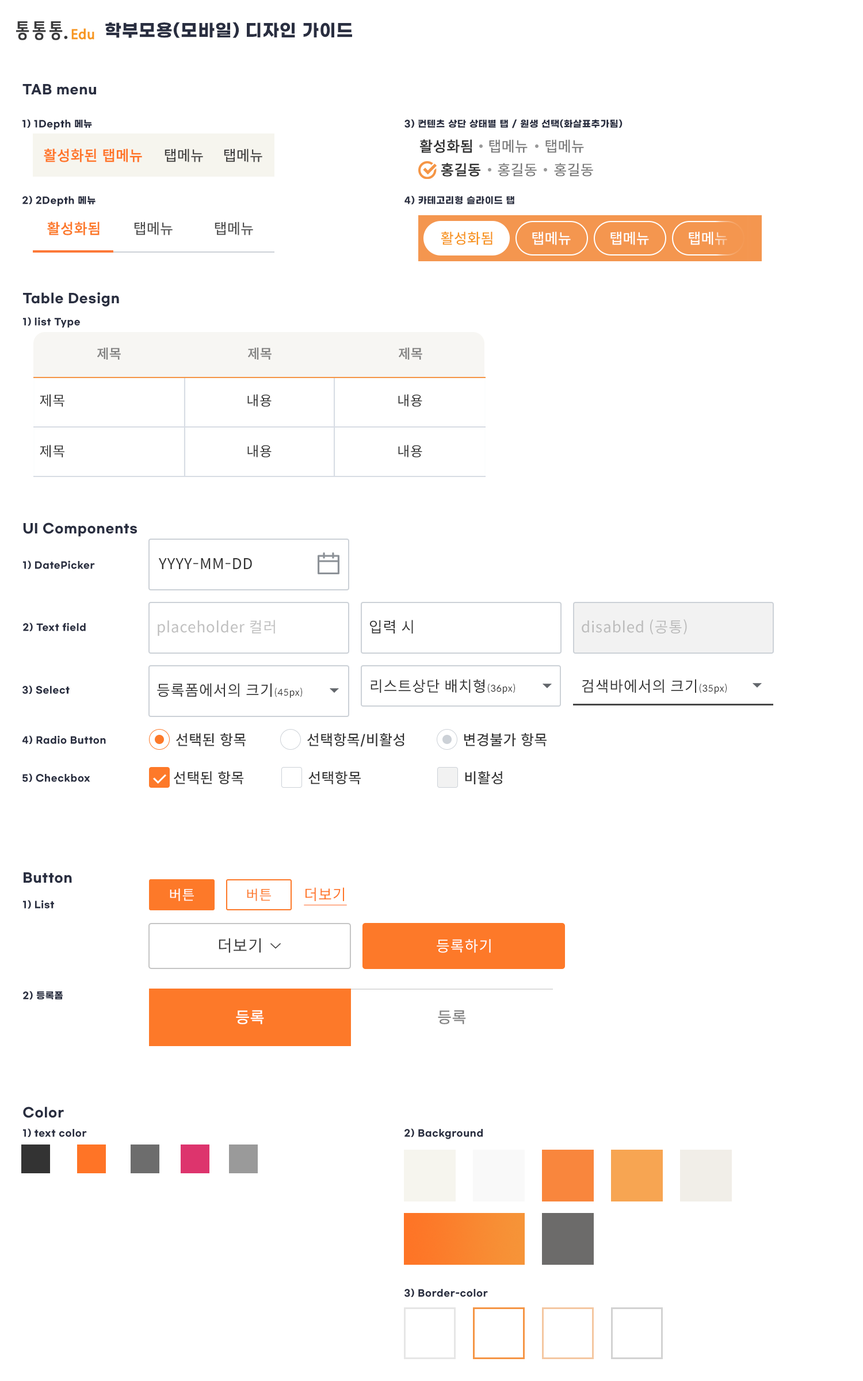
<style>
.page{position:relative;width:863px;height:1381px;background:#ffffff}
.page>*{position:absolute;margin:0}
.t1{font:17.3px "GmarketSansTTFBold";letter-spacing:0.04em;color:#292e40}
.t2{font:12.7px "GmarketSansTTFBold";letter-spacing:0.04em;color:#292e40}
.t3{font:9.2px "GmarketSansTTFBold";letter-spacing:0.04em;color:#292e40}
.t4{font:15px "Pretendard-Medium";letter-spacing:0.04em;color:#ff7426;font-weight:bold}
.t5{font:15px "Pretendard-Medium";letter-spacing:0.04em;color:#333333}
.t6{font:15px "Pretendard-Medium";letter-spacing:0.04em;color:#333333;font-weight:bold}
.t7{font:15px "Pretendard-Medium";letter-spacing:0.04em;color:#7a7a7a}
.t8{font:15px "Pretendard-Medium";letter-spacing:0.04em;color:#fc7828;font-weight:bold}
.t9{font:15px "Pretendard-Medium";letter-spacing:0.04em;color:#535353}
.t10{font:15px "Pretendard-Medium";letter-spacing:0.04em;color:#f79520}
.t11{font:15px "Pretendard-Medium";letter-spacing:0.04em;color:#ffffff}
.t12{font:13.8px "Pretendard-SemiBold";letter-spacing:0.04em;color:#838383}
.t13{font:13.8px "SpoqaHanSans-Regular";letter-spacing:0.04em;color:#333333}
.t14{font:15px "SpoqaHanSans-Regular";letter-spacing:0.04em;color:#333333}
.t15{font:15px "SpoqaHanSans-Regular";letter-spacing:0.04em;color:#c0c0c0}
.t16{font:15px "SpoqaHanSans-Regular";letter-spacing:0.04em;color:#bcbcbc}
.t17{font:9.2px "SpoqaHanSans-Regular";letter-spacing:0.04em;color:#333333}
.t18{font:14.8px "Pretendard-Medium";letter-spacing:0.04em;color:#333333}
.t19{font:13.8px "SpoqaHanSans-Regular";letter-spacing:0.04em;color:#ffffff}
.t20{font:13.8px "SpoqaHanSans-Regular";letter-spacing:0.04em;color:#fd7929}
.t21{font:15px "SpoqaHanSans-Regular";letter-spacing:0.04em;color:#ff7426;text-decoration:underline}
.t22{font:16.1px "SpoqaHanSans-Regular";letter-spacing:0.04em;color:#3c3c3c}
.t23{font:15px "SpoqaHanSans-Regular";letter-spacing:0.04em;color:#ffffff}
.t24{font:16.1px "Pretendard-Regular";letter-spacing:0.04em;color:#ffffff;font-weight:bold}
.t25{font:16.1px "Pretendard-Regular";letter-spacing:0.04em;color:#848484;font-weight:bold}
</style>
<div class="page">
<p class="t1" style="left:105px;top:22px;width:247px;height:16px">학부모용(모바일) 디자인 가이드</p>
<p class="t2" style="left:22px;top:84px;width:74px;height:11px">TAB menu</p>
<p class="t3" style="left:22px;top:119px;width:70px;height:11px">1) 1Depth 메뉴</p>
<p class="t3" style="left:405px;top:119px;width:218px;height:9px">3) 컨텐츠 상단 상태별 탭 / 원생 선택(화살표추가됨)</p>
<p class="t4" style="left:44px;top:148px;width:98px;height:14px">활성화된 탭메뉴</p>
<p class="t5" style="left:165px;top:148px;width:38px;height:14px;opacity:0.95">탭메뉴</p>
<p class="t5" style="left:224px;top:148px;width:38px;height:14px;opacity:0.95">탭메뉴</p>
<p class="t6" style="left:420px;top:139px;width:52px;height:14px">활성화됨</p>
<p class="t7" style="left:489px;top:139px;width:39px;height:14px">탭메뉴</p>
<p class="t7" style="left:546px;top:139px;width:38px;height:14px">탭메뉴</p>
<p class="t6" style="left:441px;top:163px;width:40px;height:14px">홍길동</p>
<p class="t7" style="left:498px;top:163px;width:39px;height:14px">홍길동</p>
<p class="t7" style="left:554px;top:163px;width:39px;height:14px">홍길동</p>
<p class="t3" style="left:22px;top:196px;width:74px;height:11px">2) 2Depth 메뉴</p>
<p class="t3" style="left:405px;top:196px;width:110px;height:8px">4) 카테고리형 슬라이드 탭</p>
<p class="t8" style="left:47px;top:222px;width:53px;height:13px">활성화됨</p>
<p class="t9" style="left:134px;top:222px;width:39px;height:13px">탭메뉴</p>
<p class="t9" style="left:215px;top:222px;width:38px;height:13px">탭메뉴</p>
<p class="t10" style="left:441px;top:231px;width:52px;height:14px">활성화됨</p>
<p class="t11" style="left:532px;top:231px;width:39px;height:14px">탭메뉴</p>
<p class="t11" style="left:611px;top:231px;width:38px;height:14px">탭메뉴</p>
<p class="t11" style="left:689px;top:231px;width:38px;height:14px">탭메뉴</p>
<p class="t2" style="left:23px;top:292px;width:96px;height:15px">Table Design</p>
<p class="t3" style="left:23px;top:317px;width:57px;height:11px">1) list Type</p>
<p class="t12" style="left:97px;top:348px;width:24px;height:12px">제목</p>
<p class="t12" style="left:247px;top:348px;width:25px;height:12px">제목</p>
<p class="t12" style="left:398px;top:348px;width:24px;height:12px">제목</p>
<p class="t13" style="left:40px;top:394px;width:24px;height:13px">제목</p>
<p class="t13" style="left:247px;top:394px;width:25px;height:13px">내용</p>
<p class="t13" style="left:398px;top:394px;width:24px;height:13px">내용</p>
<p class="t13" style="left:40px;top:445px;width:24px;height:13px">제목</p>
<p class="t13" style="left:247px;top:445px;width:25px;height:13px">내용</p>
<p class="t13" style="left:398px;top:445px;width:24px;height:13px">내용</p>
<p class="t2" style="left:23px;top:523px;width:114px;height:14px">UI Components</p>
<p class="t3" style="left:23px;top:561px;width:72px;height:8px">1) DatePicker</p>
<p class="t14" style="left:158px;top:558px;width:94px;height:11px">YYYY-MM-DD</p>
<p class="t3" style="left:23px;top:623px;width:63px;height:8px">2) Text field</p>
<p class="t15" style="left:158px;top:620px;width:117px;height:16px">placeholder 컬러</p>
<p class="t14" style="left:370px;top:620px;width:43px;height:14px">입력 시</p>
<p class="t16" style="left:582px;top:619px;width:105px;height:16px">disabled (공통)</p>
<p class="t3" style="left:22px;top:685px;width:48px;height:9px">3) Select</p>
<p class="t14" style="left:157px;top:683px;width:145px;height:15px">등록폼에서의 크기<span class="t17">(45px)</span></p>
<p class="t14" style="left:371px;top:679px;width:144px;height:15px">리스트상단 배치형<span class="t17">(36px)</span></p>
<p class="t14" style="left:582px;top:679px;width:145px;height:15px">검색바에서의 크기<span class="t17">(35px)</span></p>
<p class="t3" style="left:22px;top:736px;width:84px;height:8px">4) Radio Button</p>
<p class="t5" style="left:176px;top:733px;width:70px;height:13px">선택된 항목</p>
<p class="t5" style="left:307px;top:733px;width:98px;height:14px">선택항목/비활성</p>
<p class="t5" style="left:464px;top:733px;width:83px;height:13px">변경불가 항목</p>
<p class="t3" style="left:22px;top:774px;width:68px;height:8px">5) Checkbox</p>
<p class="t18" style="left:174px;top:771px;width:70px;height:13px">선택된 항목</p>
<p class="t18" style="left:308px;top:771px;width:53px;height:13px">선택항목</p>
<p class="t18" style="left:465px;top:771px;width:37px;height:13px">비활성</p>
<p class="t2" style="left:24px;top:872px;width:48px;height:11px">Button</p>
<p class="t19" style="left:170px;top:889px;width:24px;height:12px">버튼</p>
<p class="t20" style="left:247px;top:889px;width:24px;height:12px">버튼</p>
<p class="t21" style="left:304px;top:887px;width:43px;height:19px">더보기</p>
<p class="t3" style="left:23px;top:900px;width:31px;height:9px">1) List</p>
<p class="t22" style="left:219px;top:938px;width:42px;height:15px">더보기</p>
<p class="t23" style="left:437px;top:939px;width:54px;height:14px">등록하기</p>
<p class="t3" style="left:23px;top:991px;width:40px;height:9px">2) 등록폼</p>
<p class="t24" style="left:236px;top:1010px;width:28px;height:14px">등록</p>
<p class="t25" style="left:438px;top:1010px;width:28px;height:14px">등록</p>
<p class="t2" style="left:23px;top:1107px;width:41px;height:11px">Color</p>
<p class="t3" style="left:23px;top:1129px;width:64px;height:8px">1) text color</p>
<p class="t3" style="left:405px;top:1129px;width:78px;height:11px">2) Background</p>
<p class="t3" style="left:405px;top:1289px;width:83px;height:8px">3) Border-color</p>
</div>
